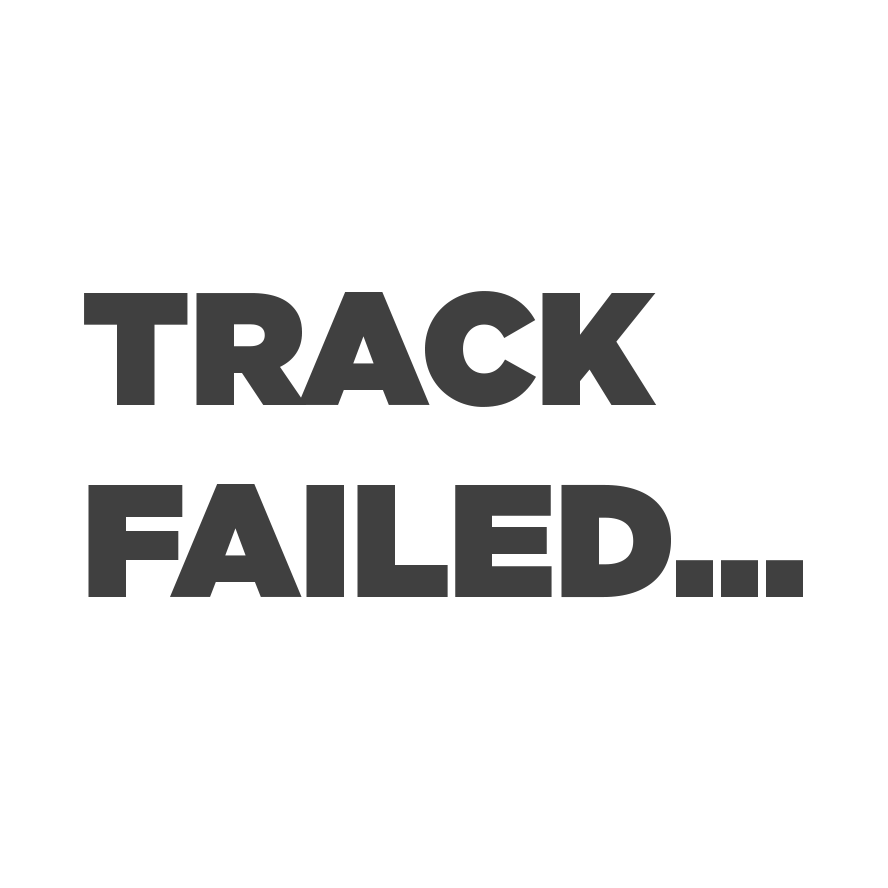
<style>
.page{position:relative;width:888px;height:888px;background:#ffffff}
.page>*{position:absolute;margin:0}
.t1{font:160px "Gotham-Ultra";color:#404040}
</style>
<div class="page">
<p class="t1" style="left:84px;top:291px;width:719px;height:307px">TRACK<br>FAILED...</p>
</div>
